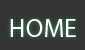
<style>
.page{position:relative;width:85px;height:50px;background:#333333}
.page>*{position:absolute;margin:0}
.t1{font:26px "MyriadPro-Regular";color:#ffffff;text-transform:uppercase}
</style>
<div class="page">
<p class="t1" style="left:10px;top:19px;width:66px;height:18px">HOME</p>
</div>
